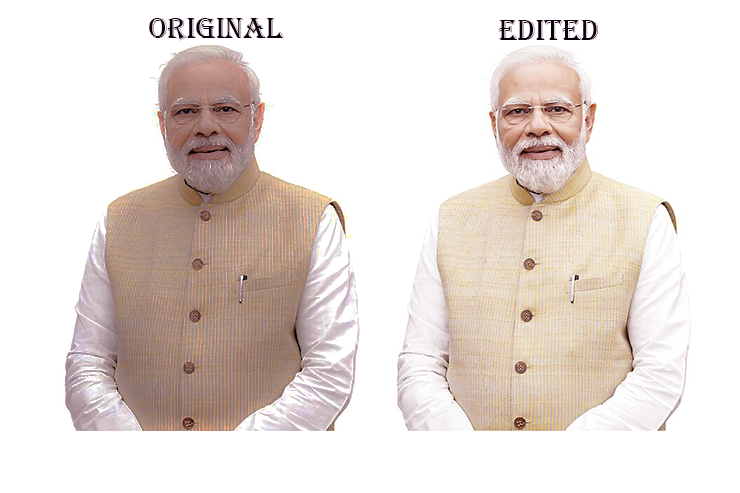
<style>
.page{position:relative;width:740px;height:493px;background:#ffffff}
.page>*{position:absolute;margin:0}
.t1{font:30px "Algerian";color:#07010e}
</style>
<div class="page">
<p class="t1" style="left:149px;top:18px;width:135px;height:23px">original</p>
<p class="t1" style="left:498px;top:20px;width:100px;height:20px">edited</p>
</div>
